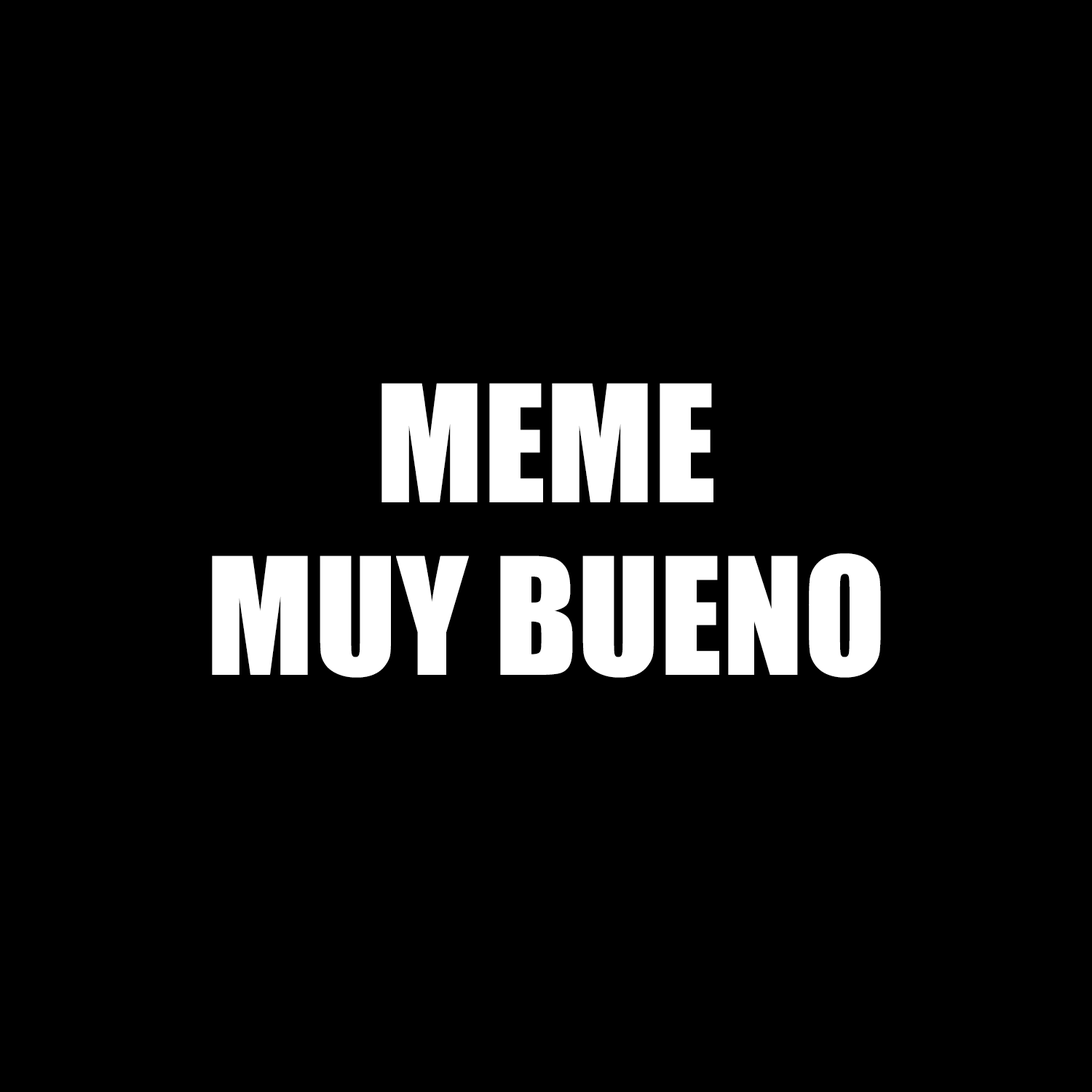
<style>
.page{position:relative;width:1092px;height:1092px;background:#000000}
.page>*{position:absolute;margin:0}
.t1{font:150.4px "Impact";color:#ffffff}
</style>
<div class="page">
<p class="t1" style="left:212px;top:383px;width:669px;height:295px;text-align:center">MEME<br>MUY BUENO</p>
</div>
